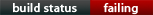
<style>
.page{position:relative;width:153px;height:15px}
.page>*{position:absolute;margin:0}
.t1{font:12.3px "MyriadPro-Regular";letter-spacing:0.01em;color:#ffffff;font-weight:bold}
</style>
<div class="page">
<p class="t1" style="left:13px;top:3px;width:64px;height:10px">build status</p>
<p class="t1" style="left:103px;top:3px;width:35px;height:12px">failing</p>
</div>
